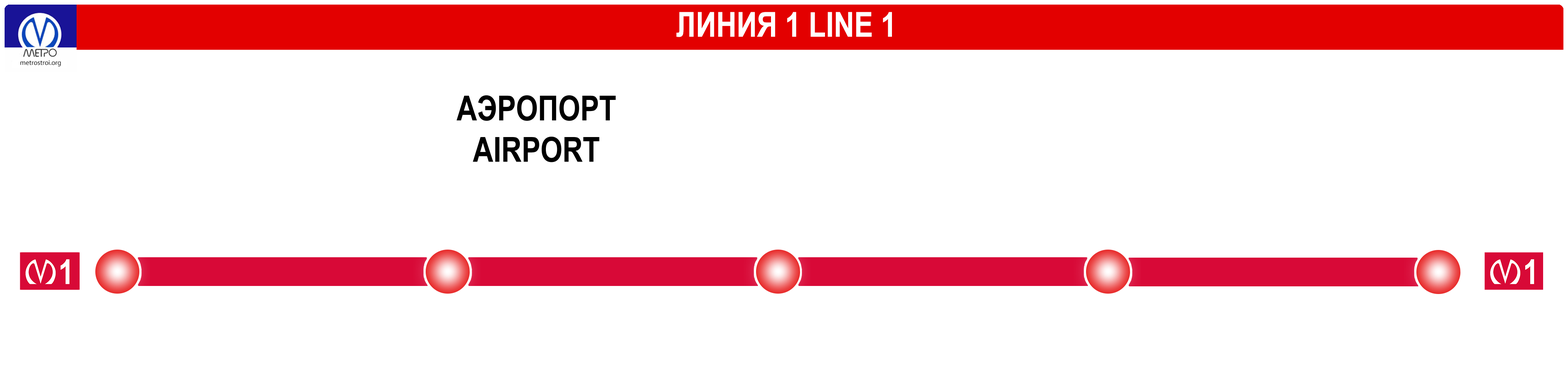
<style>
.page{position:relative;width:1568px;height:392px;background:#ffffff}
.page>*{position:absolute;margin:0}
.t1{font:34.5px "ArialNarrow-Bold";color:#ffffff}
.t2{font:6.9px "MyriadPro-Regular";color:#000000}
.t3{font:34.5px "ArialNarrow-Bold";color:#000000}
</style>
<div class="page">
<p class="t1" style="left:676px;top:12px;width:216px;height:25px">ЛИНИЯ 1 LINE 1</p>
<p class="t2" style="left:20px;top:60px;width:41px;height:7px">metrostroi.org</p>
<p class="t3" style="left:456px;top:95px;width:160px;height:67px;text-align:center">АЭРОПОРТ<br>AIRPORT</p>
</div>
